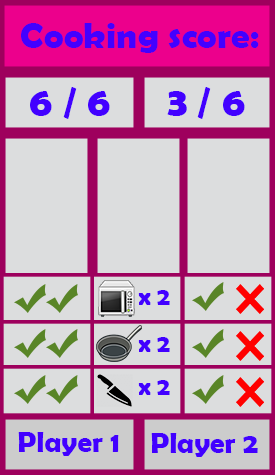
<style>
.page{position:relative;width:275px;height:475px;background:#dcddde}
.page>*{position:absolute;margin:0}
.t1{font:37.5px "BerlinSansFBDemi-Bold";color:#4200ff}
.t2{font:41.7px "BerlinSansFBDemi-Bold";color:#4200ff}
.t3{font:25px "BerlinSansFBDemi-Bold";color:#4200ff}
.t4{font:29.2px "BerlinSansFBDemi-Bold";color:#4200ff}
</style>
<div class="page">
<p class="t1" style="left:21px;top:23px;width:238px;height:30px">Cooking score:</p>
<p class="t2" style="left:30px;top:87px;width:80px;height:32px">6 / 6</p>
<p class="t2" style="left:167px;top:87px;width:78px;height:32px">3 / 6</p>
<p class="t3" style="left:138px;top:290px;width:32px;height:15px">x 2</p>
<p class="t3" style="left:138px;top:337px;width:32px;height:15px">x 2</p>
<p class="t3" style="left:138px;top:380px;width:32px;height:15px">x 2</p>
<p class="t4" style="left:18px;top:432px;width:101px;height:24px">Player 1</p>
<p class="t4" style="left:151px;top:433px;width:107px;height:24px">Player 2</p>
</div>
